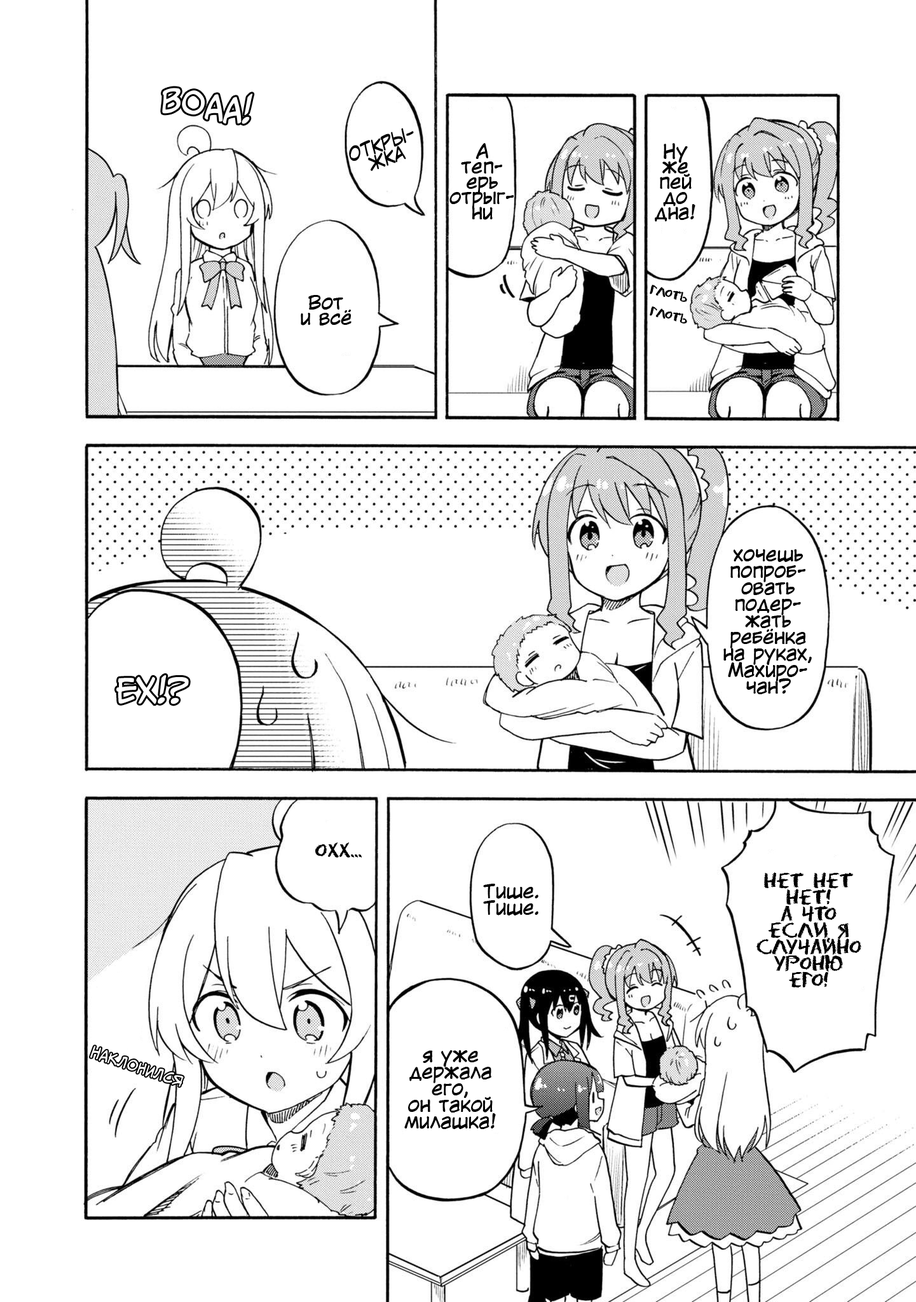
<style>
.page{position:relative;width:916px;height:1302px;background:#ffffff}
.page>*{position:absolute;margin:0}
.t1{font:30.5px "CCMeanwhile";color:#ffffff}
.t2{font:19.1px/15.3px "v_LaffayetteComicPro";color:#000000}
.t3{font:19.1px/15.3px "KuraiVoice2";color:#000000}
.t4{font:11.4px "DSEraserCyr";color:#000000}
.t5{font:19.1px/16.5px "KuraiVoice2";color:#000000}
.t6{font:19.1px "DSEraserCyr";color:#000000}
.t7{font:19.1px/16.5px "DSEraserCyr";color:#000000}
</style>
<div class="page">
<p class="t1" style="left:162px;top:88px;width:91px;height:36px;rotate:4deg">ВОАА!</p>
<p class="t2" style="left:349px;top:128px;width:65px;height:43px;text-align:center;rotate:-19deg">откры-<br>жка</p>
<p class="t3" style="left:449px;top:143px;width:65px;height:77px;text-align:center">А<br>теп-<br>ерь<br>отрыг-<br>ни</p>
<p class="t3" style="left:655px;top:143px;width:40px;height:79px;text-align:center">Ну<br>же<br>пей<br>до<br>дна!</p>
<p class="t4" style="left:650px;top:285px;width:37px;height:17px;rotate:14deg">глоть</p>
<p class="t3" style="left:301px;top:295px;width:51px;height:30px;text-align:center">Вот<br>и всё</p>
<p class="t4" style="left:650px;top:306px;width:37px;height:18px;rotate:14deg">глоть</p>
<p class="t5" style="left:723px;top:549px;width:89px;height:145px;text-align:center">хочешь<br>попроб-<br>овать<br>подер-<br>жать<br>ребёнка<br>на руках,<br>Махиро-<br>чан?</p>
<p class="t1" style="left:116px;top:675px;width:73px;height:29px">ЕХ!?</p>
<p class="t6" style="left:315px;top:842px;width:47px;height:15px">ОХХ...</p>
<p class="t7" style="left:756px;top:872px;width:105px;height:116px;text-align:center">Нет Нет<br>нет!<br>А что<br>если я<br>случайно<br>уроню<br>его!</p>
<p class="t5" style="left:483px;top:884px;width:55px;height:31px;text-align:center">Тише.<br>Тише.</p>
<p class="t5" style="left:404px;top:1049px;width:92px;height:80px;text-align:center">я уже<br>держала<br>его,<br>он такой<br>милашка!</p>
</div>
